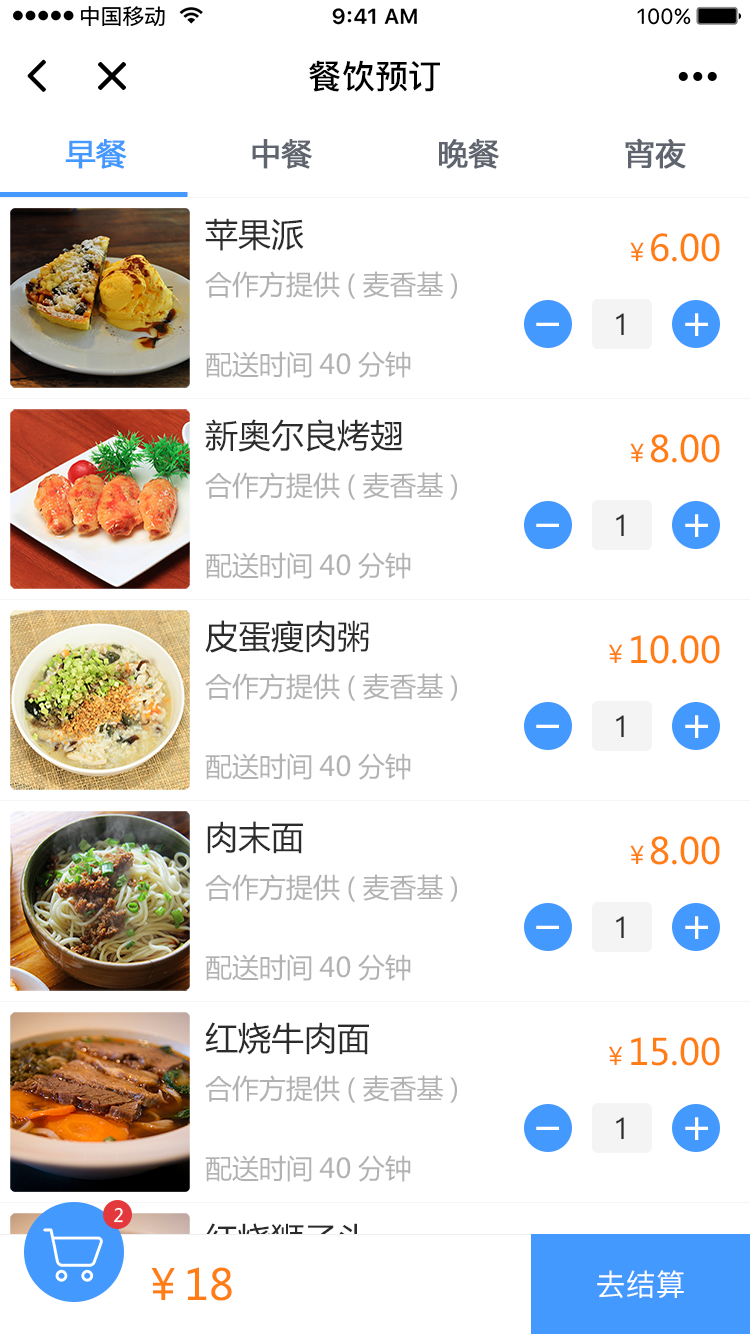
<style>
.page{position:relative;width:750px;height:1334px;background:#ffffff}
.page>*{position:absolute;margin:0}
.t1{font:33.2px "PingFang-SC-Bold";color:#000000}
.t2{font:30px "MicrosoftYaHei";color:#4499ff;font-weight:bold}
.t3{font:30px "MicrosoftYaHei";color:#5f646e;font-weight:bold}
.t4{font:33px "MicrosoftYaHei";color:#2b2b2b}
.t5{font:36px "MicrosoftYaHei";color:#ff7d13}
.t6{font:24px "MicrosoftYaHei";color:#ff7d13}
.t7{font:27px "MicrosoftYaHei";color:#b2b2b2}
.t8{font:30px "PingFang-SC-Medium";color:#2b2b2b}
.t9{font:18.1px "MicrosoftYaHei";color:#ffffff}
.t10{font:33px "MicrosoftYaHei"}
.t11{font:42.3px "MicrosoftYaHei";color:#ff7d13}
.t12{font:30px "PingFang-SC-Medium";color:#ffffff}
</style>
<div class="page">
<p class="t1" style="left:309px;top:60px;width:131px;height:32px">餐饮预订</p>
<p class="t2" style="left:65px;top:139px;width:62px;height:30px">早餐</p>
<p class="t3" style="left:252px;top:139px;width:60px;height:30px">中餐</p>
<p class="t3" style="left:439px;top:139px;width:60px;height:30px">晚餐</p>
<p class="t3" style="left:625px;top:138px;width:61px;height:31px">宵夜</p>
<p class="t4" style="left:205px;top:218px;width:99px;height:33px">苹果派</p>
<p class="t5" style="left:630px;top:233px;width:90px;height:29px"><span class="t6">￥</span>6.00</p>
<p class="t7" style="left:205px;top:271px;width:252px;height:28px">合作方提供(麦香基)</p>
<p class="t8" style="left:616px;top:313px;width:8px;height:22px">1</p>
<p class="t7" style="left:205px;top:351px;width:206px;height:27px">配送时间40分钟</p>
<p class="t4" style="left:205px;top:419px;width:198px;height:33px">新奥尔良烤翅</p>
<p class="t5" style="left:630px;top:434px;width:90px;height:29px"><span class="t6">￥</span>8.00</p>
<p class="t7" style="left:205px;top:472px;width:252px;height:28px">合作方提供(麦香基)</p>
<p class="t8" style="left:616px;top:514px;width:8px;height:22px">1</p>
<p class="t7" style="left:205px;top:552px;width:206px;height:27px">配送时间40分钟</p>
<p class="t4" style="left:205px;top:620px;width:164px;height:33px">皮蛋瘦肉粥</p>
<p class="t5" style="left:609px;top:635px;width:111px;height:29px"><span class="t6">￥</span>10.00</p>
<p class="t7" style="left:205px;top:673px;width:252px;height:28px">合作方提供(麦香基)</p>
<p class="t8" style="left:616px;top:715px;width:8px;height:22px">1</p>
<p class="t7" style="left:205px;top:753px;width:206px;height:27px">配送时间40分钟</p>
<p class="t4" style="left:207px;top:821px;width:96px;height:33px">肉末面</p>
<p class="t5" style="left:630px;top:836px;width:90px;height:29px"><span class="t6">￥</span>8.00</p>
<p class="t7" style="left:205px;top:874px;width:252px;height:28px">合作方提供(麦香基)</p>
<p class="t8" style="left:616px;top:916px;width:8px;height:22px">1</p>
<p class="t7" style="left:205px;top:954px;width:206px;height:27px">配送时间40分钟</p>
<p class="t4" style="left:205px;top:1022px;width:164px;height:33px">红烧牛肉面</p>
<p class="t5" style="left:609px;top:1037px;width:111px;height:29px"><span class="t6">￥</span>15.00</p>
<p class="t7" style="left:205px;top:1075px;width:252px;height:28px">合作方提供(麦香基)</p>
<p class="t8" style="left:616px;top:1117px;width:8px;height:22px">1</p>
<p class="t7" style="left:205px;top:1155px;width:206px;height:27px">配送时间40分钟</p>
<p class="t9" style="left:114px;top:1207px;width:9px;height:16px">2</p>
<p class="t10" style="left:205px;top:1223px;width:165px;height:33px">红烧狮子头</p>
<p class="t11" style="left:151px;top:1267px;width:81px;height:34px">￥18</p>
<p class="t12" style="left:597px;top:1270px;width:87px;height:29px">去结算</p>
</div>
